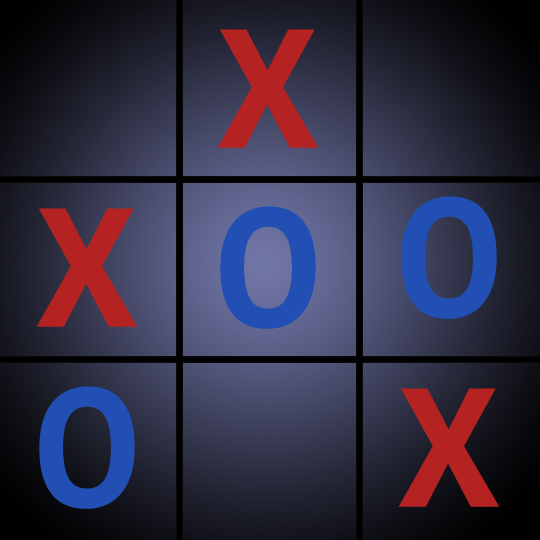
<style>
.page{position:relative;width:540px;height:540px}
.page>*{position:absolute;margin:0}
.t1{font:185px "Consolas-Bold";color:#b42222}
.t2{font:185px "Consolas-Bold";color:#224fb4}
</style>
<div class="page">
<p class="t1" style="left:217px;top:29px;width:102px;height:119px">X</p>
<p class="t2" style="left:401px;top:196px;width:96px;height:123px">O</p>
<p class="t1" style="left:36px;top:208px;width:102px;height:119px">X</p>
<p class="t2" style="left:220px;top:206px;width:96px;height:123px">O</p>
<p class="t2" style="left:39px;top:386px;width:96px;height:123px">O</p>
<p class="t1" style="left:398px;top:388px;width:102px;height:119px">X</p>
</div>
